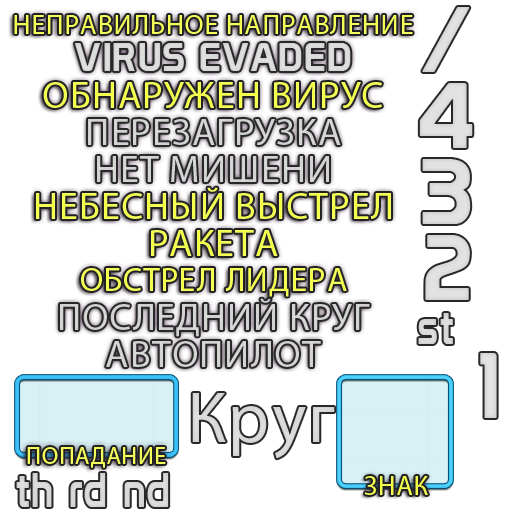
<style>
.page{position:relative;width:512px;height:512px;background:#ffffff}
.page>*{position:absolute;margin:0}
.t1{font:28px "MyriadPro-Regular";letter-spacing:0.03em;color:#f4ff5d}
.t2{font:38.5px "Prototype";letter-spacing:0.03em;color:#dbdbdb}
.t3{font:38.5px "MyriadPro-Regular";letter-spacing:0.03em;color:#f4ff52}
.t4{font:38.5px "MyriadPro-Regular";letter-spacing:0.03em;color:#d3d3d3}
.t5{font:38.5px "MyriadPro-Regular";letter-spacing:0.03em;color:#f4ff57}
.t6{font:38.5px "MyriadPro-Regular";letter-spacing:0.03em;color:#f4ff50}
.t7{font:33.6px "MyriadPro-Regular";letter-spacing:0.03em;color:#f4ff57}
.t8{font:47.3px "Prototype";letter-spacing:0.03em;color:#d8d8d8;scale:0.87 1}
.t9{font:90px "Prototype";letter-spacing:0.03em;color:#dfdfdf}
.t10{font:24px "MyriadPro-Regular";letter-spacing:0.03em;color:#f4ff5d}
.t11{font:27.1px "MyriadPro-Regular";letter-spacing:0.03em;color:#f3ff49}
</style>
<div class="page">
<p class="t1" style="left:14px;top:15px;width:399px;height:19px">НЕПРАВИЛЬНОЕ НАПРАВЛЕНИЕ</p>
<p class="t2" style="left:74px;top:43px;width:277px;height:28px">VIRUS EVADED</p>
<p class="t3" style="left:43px;top:82px;width:339px;height:26px">ОБНАРУЖЕН ВИРУС</p>
<p class="t4" style="left:88px;top:119px;width:253px;height:26px">ПЕРЕЗАГРУЗКА</p>
<p class="t4" style="left:97px;top:156px;width:232px;height:26px">НЕТ МИШЕНИ</p>
<p class="t5" style="left:36px;top:187px;width:355px;height:32px">НЕБЕСНЫЙ ВЫСТРЕЛ</p>
<p class="t6" style="left:151px;top:230px;width:127px;height:26px">РАКЕТА</p>
<p class="t7" style="left:81px;top:268px;width:266px;height:29px">ОБСТРЕЛ ЛИДЕРА</p>
<p class="t8" style="left:418px;top:313px;width:35px;height:31px">st</p>
<p class="t4" style="left:106px;top:341px;width:215px;height:26px">АВТОПИЛОТ</p>
<p class="t9" style="left:480px;top:353px;width:17px;height:65px">1</p>
<p class="t10" style="left:27px;top:447px;width:139px;height:21px">ПОПАДАНИЕ</p>
<p class="t8" style="left:16px;top:473px;width:36px;height:34px">th</p>
<p class="t11" style="left:364px;top:476px;width:64px;height:19px">ЗНАК</p>
</div>
